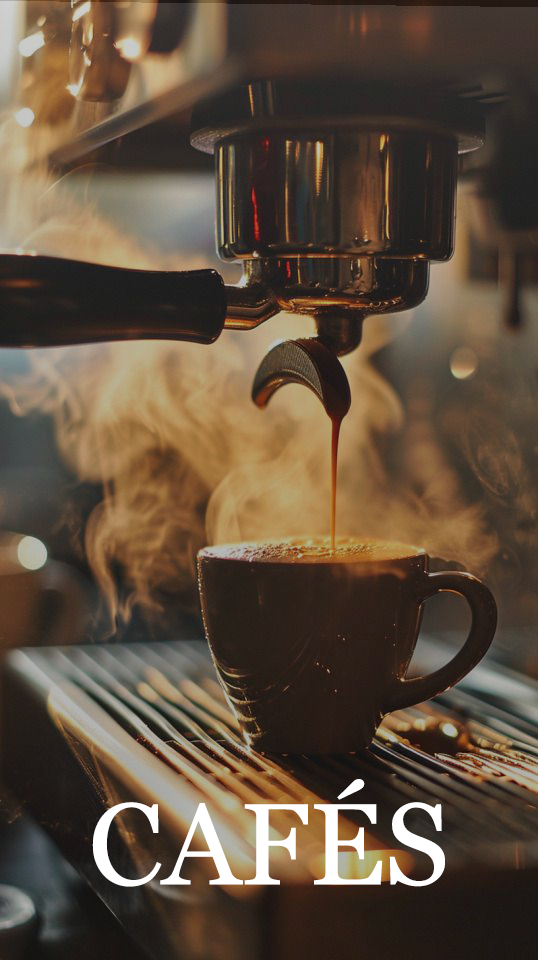
<style>
.page{position:relative;width:538px;height:960px}
.page>*{position:absolute;margin:0}
.t1{font:115.5px "Georgia";color:#ffffff}
</style>
<div class="page">
<p class="t1" style="left:92px;top:779px;width:353px;height:108px">CAFÉS</p>
</div>
